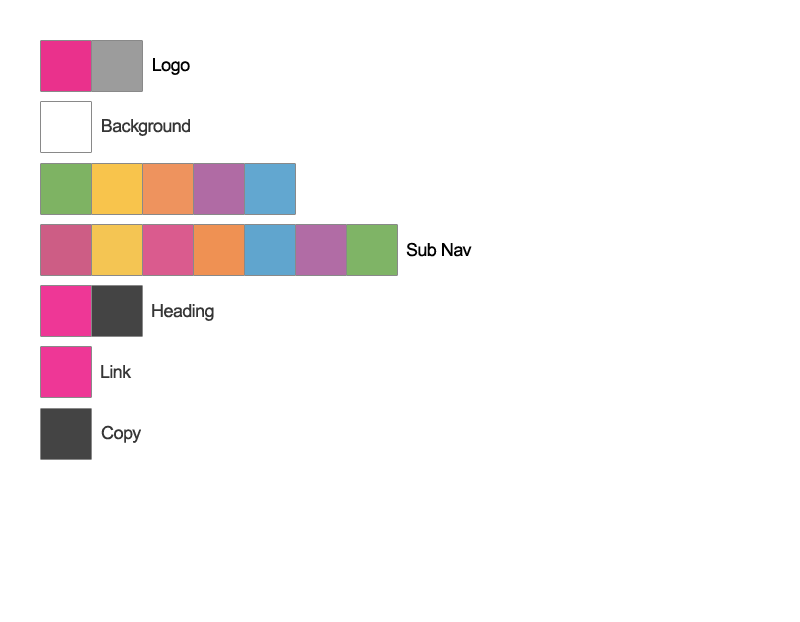
<style>
.page{position:relative;width:800px;height:622px;background:#ffffff}
.page>*{position:absolute;margin:0}
.t1{font:18px "ArialMT";letter-spacing:-0.025em;color:#000000}
.t2{font:18px "ArialMT";letter-spacing:-0.025em;color:#363636}
</style>
<div class="page">
<p class="t1" style="left:153px;top:58px;width:37px;height:17px">Logo</p>
<p class="t2" style="left:102px;top:119px;width:88px;height:17px">Background</p>
<p class="t1" style="left:406px;top:242px;width:66px;height:15px">Sub Nav</p>
<p class="t2" style="left:152px;top:304px;width:62px;height:17px">Heading</p>
<p class="t2" style="left:101px;top:365px;width:31px;height:13px">Link</p>
<p class="t2" style="left:101px;top:425px;width:40px;height:18px">Copy</p>
</div>
